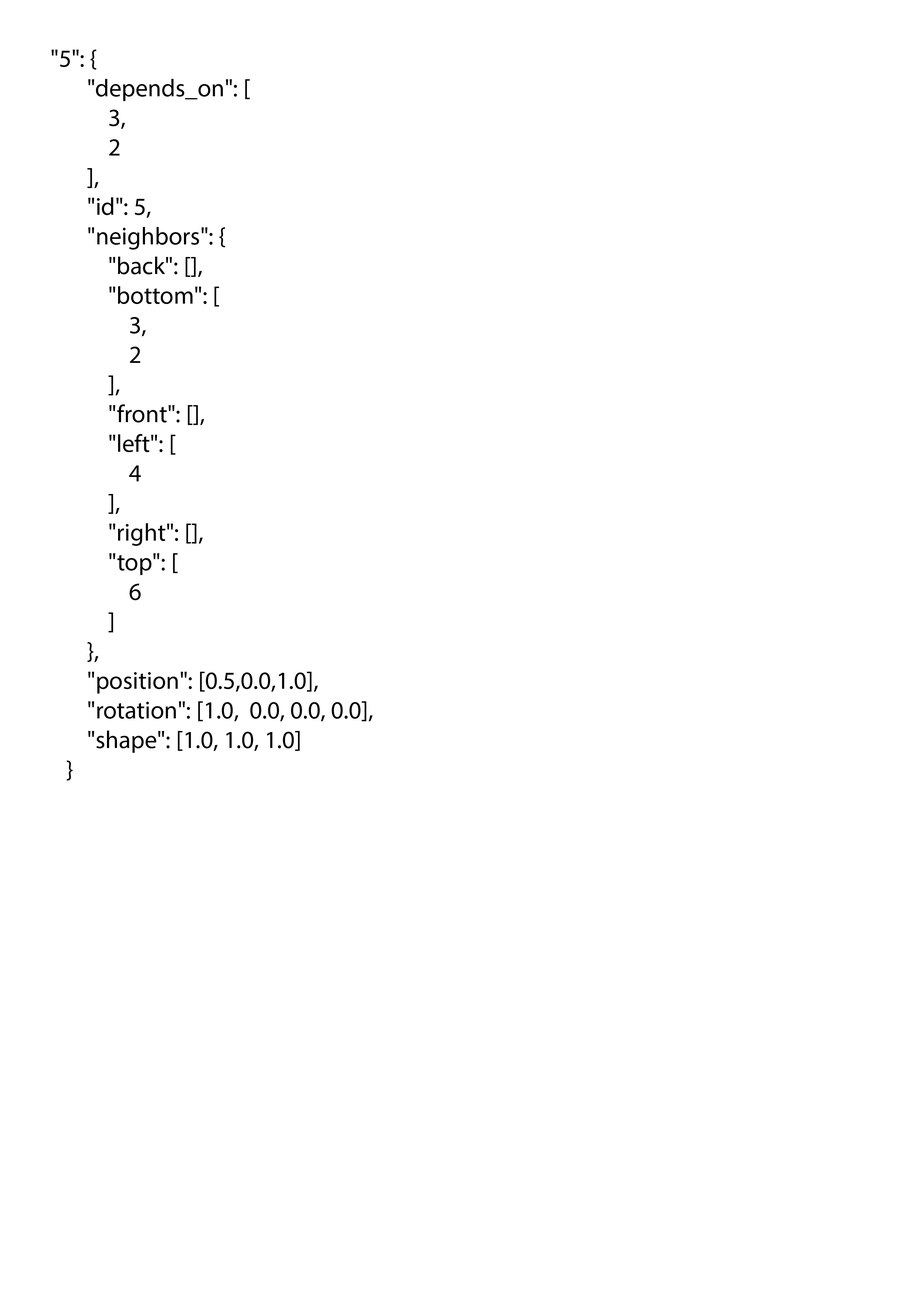
<style>
.page{position:relative;width:918px;height:1299px;background:#ffffff}
.page>*{position:absolute;margin:0}
.t1{font:24.7px "MyriadPro-Regular";color:#000000}
</style>
<div class="page">
<p class="t1" style="left:51px;top:50px;width:322px;height:730px">"5": {<br>        "depends_on": [<br>            3,<br>            2<br>        ],<br>        "id": 5,<br>        "neighbors": {<br>            "back": [],<br>            "bottom": [<br>                3,<br>                2<br>            ],<br>            "front": [],<br>            "left": [<br>                4<br>            ],<br>            "right": [],<br>            "top": [<br>                6<br>            ]<br>        },<br>        "position": [0.5,0.0,1.0],<br>        "rotation": [1.0,  0.0, 0.0, 0.0],<br>        "shape": [1.0, 1.0, 1.0]<br>    }</p>
</div>
